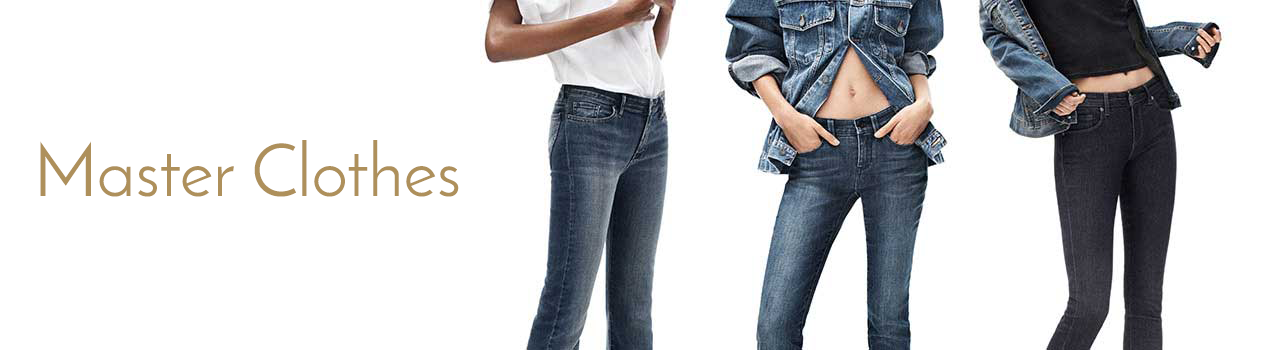
<style>
.page{position:relative;width:1280px;height:350px;background:#ffffff}
.page>*{position:absolute;margin:0}
.t1{font:73px "JosefinSans";color:#ae905b}
</style>
<div class="page">
<p class="t1" style="left:40px;top:140px;width:419px;height:57px">Master Clothes</p>
</div>
